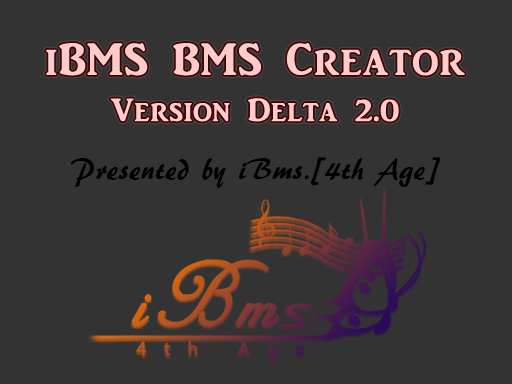
<style>
.page{position:relative;width:512px;height:384px;background:#333333}
.page>*{position:absolute;margin:0}
.t1{font:33.3px/55.6px "ARJULIAN";letter-spacing:0.025em;color:#ffcccc}
.t2{font:46.7px/55.6px "ARJULIAN";letter-spacing:0.025em;color:#ffcccc}
.t3{font:30.6px "ARBERKLEY";letter-spacing:0.025em;color:#000000}
</style>
<div class="page">
<p class="t1" style="left:46px;top:42px;width:419px;height:80px;text-align:center"><span class="t2">iBMS BMS Creator<br></span>Version Delta 2.0</p>
<p class="t3" style="left:70px;top:157px;width:371px;height:31px">Presented by iBms.[4th Age]</p>
</div>
